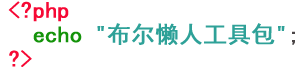
<style>
.page{position:relative;width:300px;height:70px;background:#ffffff}
.page>*{position:absolute;margin:0}
.t1{font:23.2px/24.5px "SimHei";color:#2ea198;font-weight:bold}
.t2{font:23.2px/24.5px "SimHei";color:#f60935;font-weight:bold}
.t3{font:23.2px/24.5px "SimHei";color:#14930a;font-weight:bold}
.t4{font:23.2px/24.5px "SimHei";color:#4a4546;font-weight:bold}
</style>
<div class="page">
<p class="t1" style="left:8px;top:1px;width:287px;height:66px"><span class="t2">&lt;?php <br>  </span><span class="t3">echo </span>"布尔懒人工具包"<span class="t4">;<br></span><span class="t2">?&gt;</span></p>
</div>
